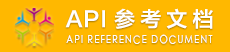
<style>
.page{position:relative;width:230px;height:52px;background:#ffb800}
.page>*{position:absolute;margin:0}
.t1{font:21px "FZLTZHK--GBK1-0";letter-spacing:0.3em;color:#ffffff}
.t2{font:21px "FZLTZHK--GBK1-0";letter-spacing:0.05em;color:#ffffff}
.t3{font:11.4px "STHeitiSC-Light";letter-spacing:0.11em;color:#ffffff;scale:0.83 1}
</style>
<div class="page">
<p class="t1" style="left:65px;top:8px;width:148px;height:21px"><span class="t2">API </span>参考文档</p>
<p class="t3" style="left:66px;top:34px;width:147px;height:10px">API REFERENCE DOCUMENT</p>
</div>
